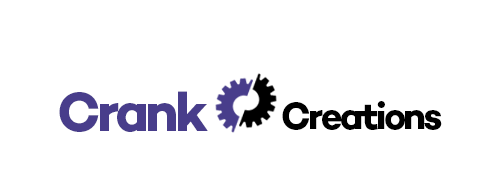
<style>
.page{position:relative;width:499px;height:182px;background:#ffffff}
.page>*{position:absolute;margin:0}
.t1{font:94.7px "Campton-BoldDEMO";letter-spacing:-0.07em;color:#483d8b}
.t2{font:65px "Campton-BoldDEMO";letter-spacing:-0.07em;color:#000000}
</style>
<div class="page">
<p class="t1" style="left:59px;top:91px;width:149px;height:41px">Crank</p>
<p class="t2" style="left:282px;top:101px;width:160px;height:29px">Creations</p>
</div>
